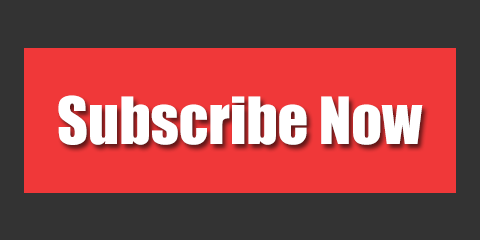
<style>
.page{position:relative;width:480px;height:240px;background:#333333}
.page>*{position:absolute;margin:0}
.t1{font:60px "Impact";color:#ffffff}
</style>
<div class="page">
<p class="t1" style="left:58px;top:95px;width:365px;height:50px">Subscribe Now</p>
</div>
